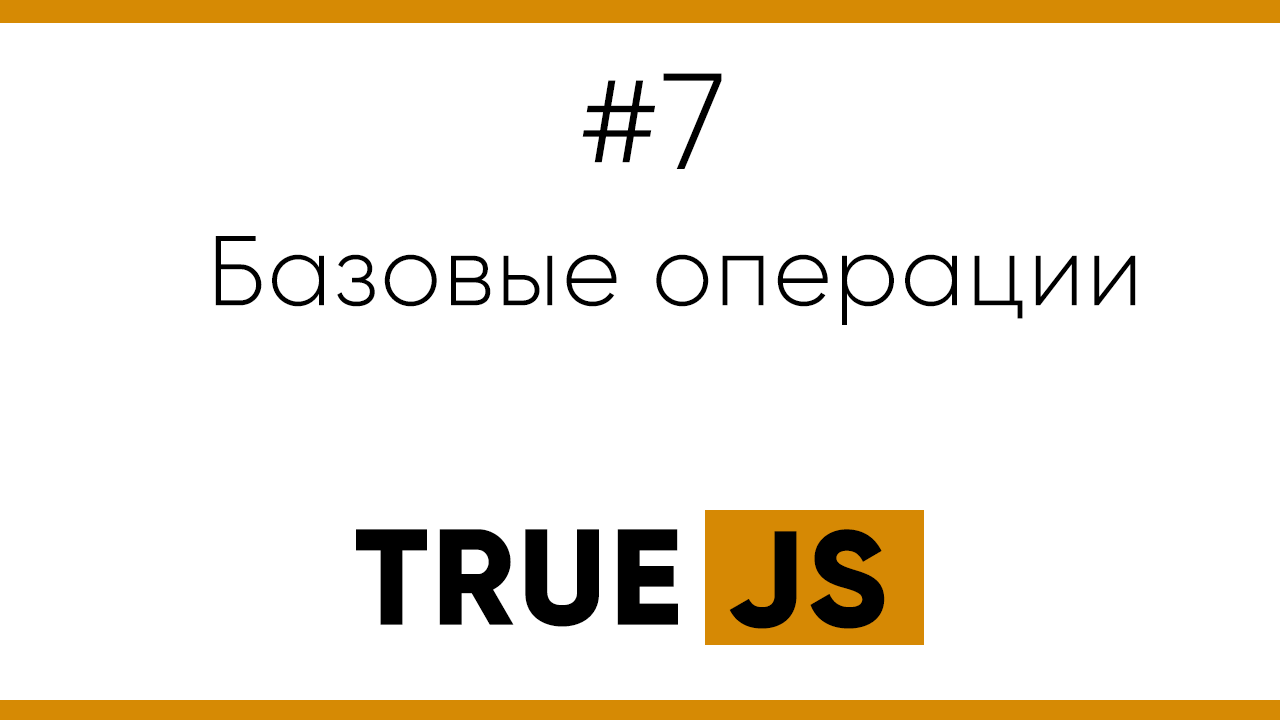
<style>
.page{position:relative;width:1280px;height:720px;background:#ffffff}
.page>*{position:absolute;margin:0}
.t1{font:136px "Gilroy-Light";letter-spacing:0.025em;color:#000000}
.t2{font:99px "Gilroy-Light";letter-spacing:0.025em;color:#000000}
.t3{font:136px "Gilroy-ExtraBold";letter-spacing:0.025em;color:#000000}
</style>
<div class="page">
<p class="t1" style="left:582px;top:73px;width:140px;height:96px">#7</p>
<p class="t2" style="left:215px;top:236px;width:921px;height:89px">Базовые операции</p>
<p class="t3" style="left:356px;top:529px;width:322px;height:98px">TRUE</p>
<p class="t3" style="left:729px;top:529px;width:156px;height:100px">JS</p>
</div>
